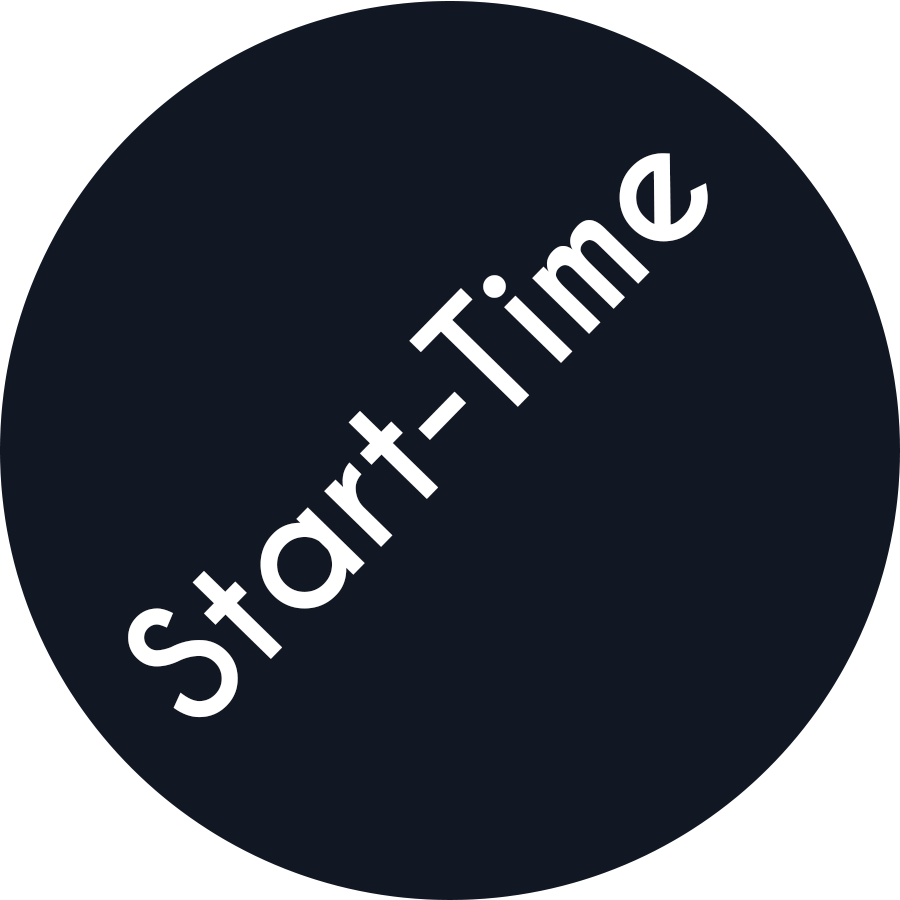
<style>
.page{position:relative;width:900px;height:900px;background:#111824}
.page>*{position:absolute;margin:0}
.t1{font:158.2px "CaviarDreams-Bold";color:#ffffff}
</style>
<div class="page">
<p class="t1" style="left:128px;top:153px;width:580px;height:565px;rotate:-46deg">Start-Time</p>
</div>
